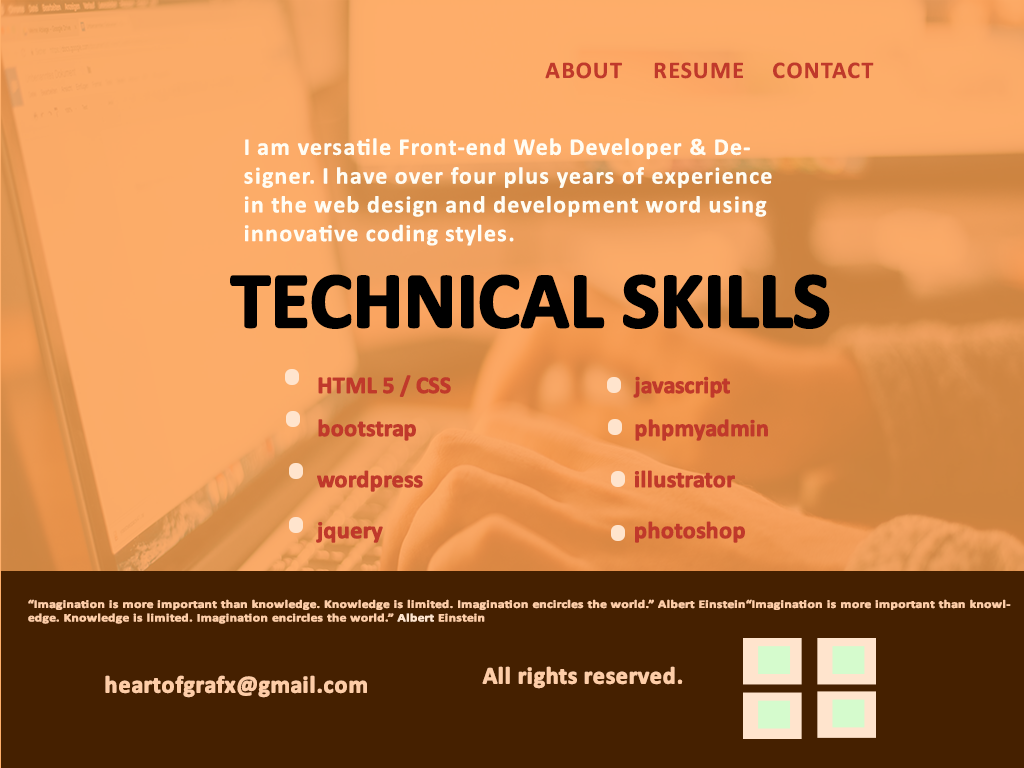
<style>
.page{position:relative;width:1024px;height:768px;background:#452000}
.page>*{position:absolute;margin:0}
.t1{font:24px "Calibri-Bold";letter-spacing:0.05em;color:#c0392b}
.t2{font:24px "Calibri-Bold";letter-spacing:0.05em;color:#fffdf3}
.t3{font:80px "Calibri-Bold";letter-spacing:-0.025em;color:#000000;font-weight:bold}
.t4{font:24px "Calibri-Bold";letter-spacing:-0.025em;color:#c0392b;font-weight:bold}
.t5{font:23.8px "Calibri-Bold";letter-spacing:-0.025em;color:#c0392b;font-weight:bold}
.t6{font:11.3px "Calibri-Bold";color:#fecda7;font-weight:bold;scale:1.19 1}
.t7{font:11.3px "Calibri-Bold";color:#ffe4cd;font-weight:bold;scale:1.19 1}
.t8{font:24px "Calibri-Bold";color:#fecda7;font-weight:bold}
</style>
<div class="page">
<p class="t1" style="left:545px;top:62px;width:77px;height:17px">ABOUT</p>
<p class="t1" style="left:654px;top:62px;width:89px;height:17px">RESUME</p>
<p class="t1" style="left:773px;top:62px;width:101px;height:17px">CONTACT</p>
<p class="t2" style="left:244px;top:138px;width:528px;height:108px">I am versatile Front-end Web Developer &amp; Designer. I have over four plus years of experience in the web design and development word using innovative coding styles.</p>
<p class="t3" style="left:230px;top:274px;width:600px;height:55px">TECHNICAL SKILLS</p>
<p class="t4" style="left:318px;top:375px;width:133px;height:22px">HTML 5 / CSS</p>
<p class="t4" style="left:633px;top:376px;width:97px;height:22px">javascript</p>
<p class="t4" style="left:318px;top:419px;width:98px;height:22px">bootstrap</p>
<p class="t4" style="left:635px;top:419px;width:133px;height:22px">phpmyadmin</p>
<p class="t5" style="left:317px;top:470px;width:106px;height:22px">wordpress</p>
<p class="t5" style="left:634px;top:470px;width:101px;height:18px">illustrator</p>
<p class="t5" style="left:635px;top:521px;width:110px;height:22px">photoshop</p>
<p class="t5" style="left:316px;top:522px;width:67px;height:21px">jquery</p>
<p class="t6" style="left:28px;top:599px;width:983px;height:25px">“Imagination is more important than knowledge. Knowledge is limited. Imagination encircles the world.” Albert Einstein“Imagination is more important than knowledge. Knowledge is limited. Imagination encircles the world.” <span class="t7">Albert </span>Einstein</p>
<p class="t8" style="left:105px;top:675px;width:262px;height:23px">heartofgrafx@gmail.com</p>
<p class="t8" style="left:482px;top:666px;width:201px;height:23px">All rights reserved.</p>
</div>
